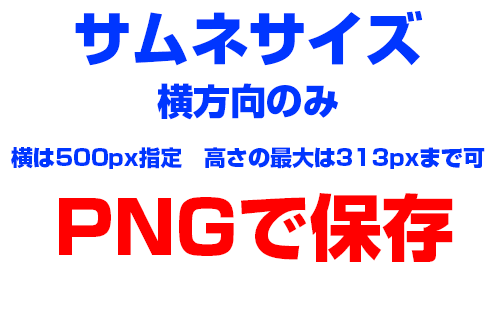
<style>
.page{position:relative;width:500px;height:313px;background:#ffffff}
.page>*{position:absolute;margin:0}
.t1{font:21.9px "ShinGoPr6-Heavy";color:#0036ff}
.t2{font:58.4px/73px "ShinGoPr6-Heavy";color:#0036ff}
.t3{font:36.5px "ShinGoPr6-Heavy";color:#0036ff}
.t4{font:72px "ShinGoPr6-Heavy";color:#ff0000}
</style>
<div class="page">
<p class="t1" style="left:11px;top:10px;width:474px;height:159px;text-align:center"><span class="t2">サムネサイズ<br></span><span class="t3">横方向のみ<br></span>横は500px指定　高さの最大は313pxまで可</p>
<p class="t4" style="left:59px;top:193px;width:394px;height:69px">PNGで保存</p>
</div>
